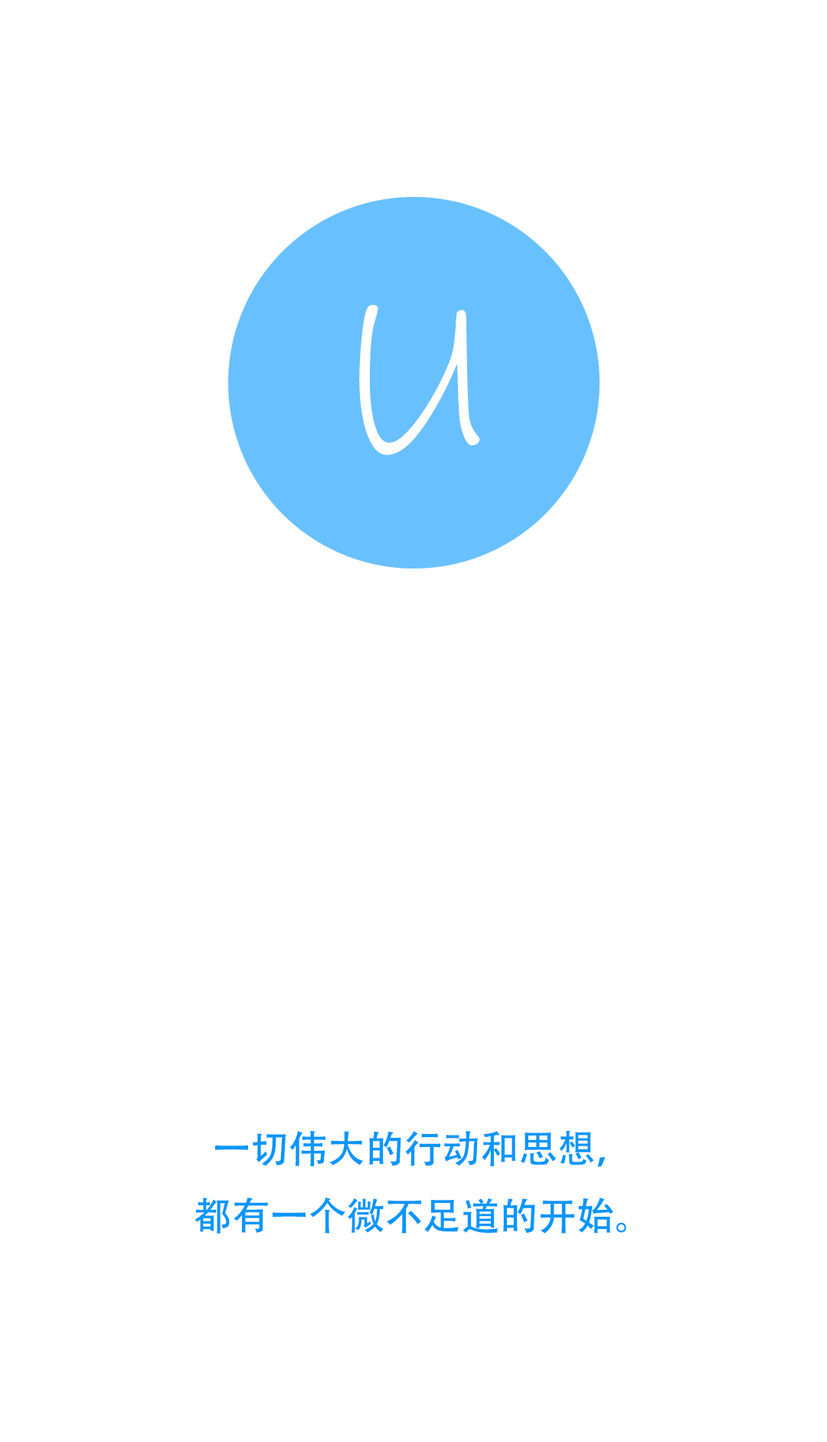
<style>
.page{position:relative;width:827px;height:1442px;background:#ffffff}
.page>*{position:absolute;margin:0}
.t1{font:217px "InkFree";color:#ffffff}
.t2{font:38.3px "AdobeHeitiStd-Regular";color:#0396ff}
</style>
<div class="page">
<p class="t1" style="left:359px;top:305px;width:121px;height:150px">U</p>
<p class="t2" style="left:195px;top:1130px;width:432px;height:103px;text-align:center">一切伟大的行动和思想，<br>都有一个微不足道的开始。</p>
</div>
